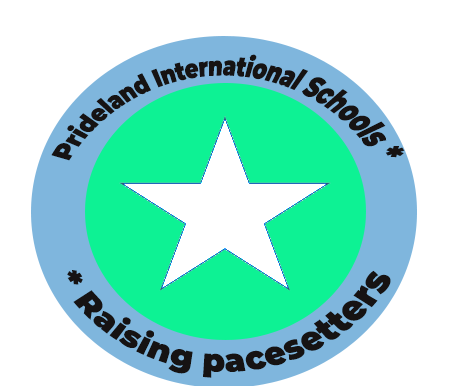
<style>
.page{position:relative;width:452px;height:386px;background:#ffffff}
.page>*{position:absolute;margin:0}
.t1{font:17.3px "MontserratThin-Black";color:#161313}
.t2{font:25.6px "MontserratThin-Black";color:#161313}
</style>
<div class="page">
<p class="t1" style="left:51px;top:54px;width:354px;height:107px">Prideland International Schools *</p>
<p class="t2" style="left:67px;top:270px;width:324px;height:108px">* Raising pacesetters</p>
</div>
